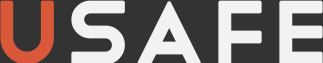
<style>
.page{position:relative;width:323px;height:63px;background:#333333}
.page>*{position:absolute;margin:0}
.t1{font:114.9px "Telegrafico";color:#f2f2f2;font-weight:bold}
.t2{font:114.9px "Telegrafico";color:#da583a;font-weight:bold}
</style>
<div class="page">
<p class="t1" style="left:0px;top:0px;width:323px;height:65px"><span class="t2">u</span>Safe</p>
</div>
